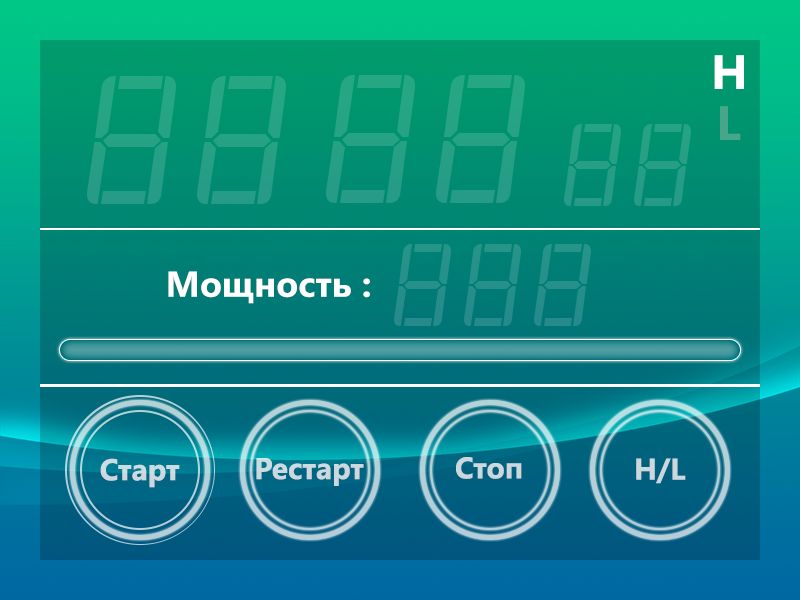
<style>
.page{position:relative;width:800px;height:600px}
.page>*{position:absolute;margin:0}
.t1{font:48px "SegoeUI-Bold";color:#ffffff}
.t2{font:48px "SegoeUI-Bold";color:#47a589}
.t3{font:35.9px "SegoeUI-Bold";color:#ffffff}
.t4{font:30px "SegoeUI-Bold";color:#cbdde2}
.t5{font:30px "SegoeUI-Bold";color:#cbd9de}
.t6{font:30px "SegoeUI-Bold";color:#cbd8de}
.t7{font:30px "SegoeUI-Bold";color:#cbd8dd}
</style>
<div class="page">
<p class="t1" style="left:714px;top:55px;width:30px;height:34px;opacity:0.15">H</p>
<p class="t1" style="left:714px;top:55px;width:30px;height:34px">H</p>
<p class="t2" style="left:720px;top:106px;width:21px;height:34px">L</p>
<p class="t3" style="left:168px;top:271px;width:202px;height:33px">Мощность :</p>
<p class="t4" style="left:100px;top:458px;width:80px;height:30px">Старт</p>
<p class="t5" style="left:256px;top:458px;width:108px;height:28px">Рестарт</p>
<p class="t6" style="left:456px;top:457px;width:66px;height:22px">Стоп</p>
<p class="t7" style="left:636px;top:458px;width:50px;height:26px">H/L</p>
</div>
